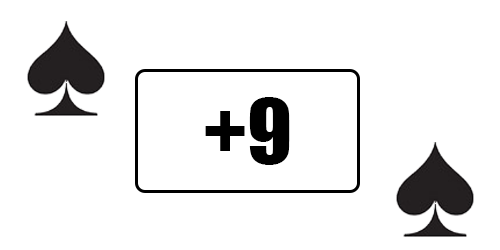
<style>
.page{position:relative;width:500px;height:250px;background:#ffffff}
.page>*{position:absolute;margin:0}
.t1{font:83.3px "Impact";color:#000000}
</style>
<div class="page">
<p class="t1" style="left:205px;top:97px;width:85px;height:68px">+9</p>
</div>
